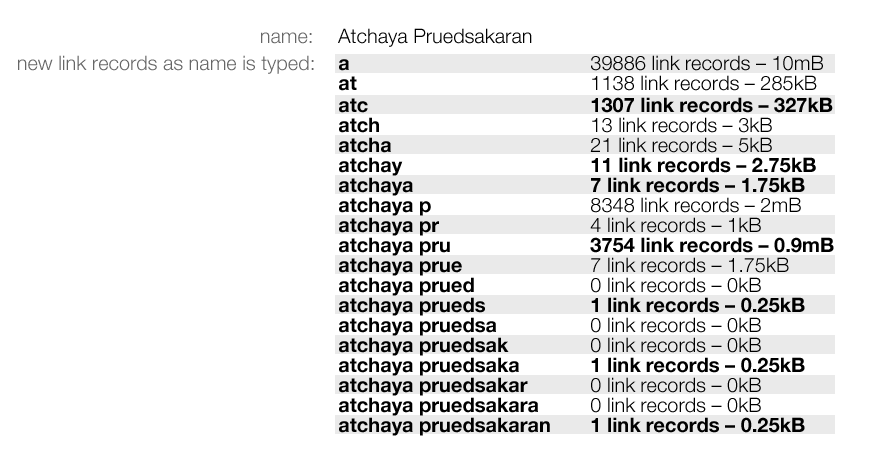
<style>
.page{position:relative;width:875px;height:466px;background:#ffffff}
.page>*{position:absolute;margin:0}
.t1{font:20px "HelveticaNeue-Light";color:#000000}
.t2{font:20px "HelveticaNeue-Light";color:#666666}
.t3{font:20px "HelveticaNeue-Bold";color:#000000}
</style>
<div class="page">
<p class="t1" style="left:338px;top:28px;width:194px;height:19px">Atchaya Pruedsakaran</p>
<p class="t2" style="left:261px;top:32px;width:51px;height:12px">name:</p>
<p class="t2" style="left:18px;top:55px;width:296px;height:19px">new link records as name is typed:</p>
<p class="t1" style="left:339px;top:55px;width:484px;height:16px"><span class="t3">a</span>        39886 link records – 10mB</p>
<p class="t1" style="left:339px;top:75px;width:478px;height:16px"><span class="t3">at</span>        1138 link records – 285kB</p>
<p class="t3" style="left:339px;top:97px;width:494px;height:16px">atc        1307 link records – 327kB</p>
<p class="t1" style="left:339px;top:117px;width:433px;height:16px"><span class="t3">atch</span>       13 link records – 3kB</p>
<p class="t1" style="left:339px;top:137px;width:433px;height:16px"><span class="t3">atcha</span>       21 link records – 5kB</p>
<p class="t3" style="left:339px;top:157px;width:477px;height:19px">atchay       11 link records – 2.75kB</p>
<p class="t3" style="left:339px;top:177px;width:466px;height:19px">atchaya      7 link records – 1.75kB</p>
<p class="t1" style="left:339px;top:197px;width:462px;height:19px"><span class="t3">atchaya p     </span>8348 link records – 2mB</p>
<p class="t1" style="left:339px;top:217px;width:422px;height:19px"><span class="t3">atchaya pr     </span>4 link records – 1kB</p>
<p class="t3" style="left:339px;top:237px;width:495px;height:19px">atchaya pru     3754 link records – 0.9mB</p>
<p class="t1" style="left:339px;top:257px;width:450px;height:19px"><span class="t3">atchaya prue</span>     7 link records – 1.75kB</p>
<p class="t1" style="left:339px;top:277px;width:422px;height:19px"><span class="t3">atchaya prued</span>     0 link records – 0kB</p>
<p class="t3" style="left:339px;top:297px;width:466px;height:19px">atchaya prueds   1 link records – 0.25kB</p>
<p class="t1" style="left:339px;top:317px;width:422px;height:19px"><span class="t3">atchaya pruedsa</span>   0 link records – 0kB</p>
<p class="t1" style="left:339px;top:337px;width:422px;height:19px"><span class="t3">atchaya pruedsak</span>   0 link records – 0kB</p>
<p class="t3" style="left:339px;top:357px;width:466px;height:19px">atchaya pruedsaka  1 link records – 0.25kB</p>
<p class="t1" style="left:339px;top:377px;width:422px;height:19px"><span class="t3">atchaya pruedsakar</span>  0 link records – 0kB</p>
<p class="t1" style="left:339px;top:397px;width:422px;height:19px"><span class="t3">atchaya pruedsakara</span>  0 link records – 0kB</p>
<p class="t3" style="left:339px;top:417px;width:466px;height:19px">atchaya pruedsakaran  1 link records – 0.25kB</p>
</div>
